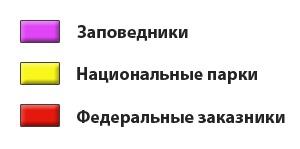
<style>
.page{position:relative;width:300px;height:149px;background:#ffffff}
.page>*{position:absolute;margin:0}
.t1{font:18px "MyriadPro-Bold";color:#242424}
</style>
<div class="page">
<p class="t1" style="left:77px;top:25px;width:111px;height:16px">Заповедники</p>
<p class="t1" style="left:77px;top:67px;width:180px;height:17px">Национальные парки</p>
<p class="t1" style="left:77px;top:110px;width:208px;height:17px">Федеральные заказники</p>
</div>
